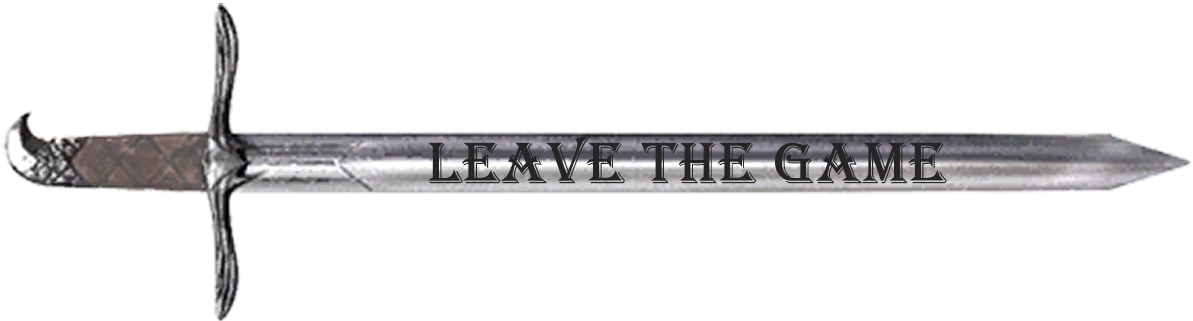
<style>
.page{position:relative;width:1193px;height:321px;background:#ffffff}
.page>*{position:absolute;margin:0}
.t1{font:60px "Algerian";color:#262424;font-weight:bold}
</style>
<div class="page">
<p class="t1" style="left:428px;top:133px;width:519px;height:51px">LEAVE THE GAME</p>
</div>
